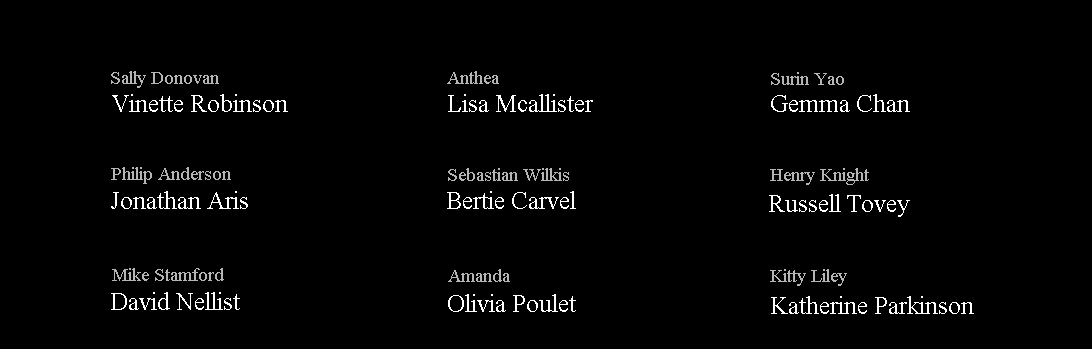
<style>
.page{position:relative;width:1092px;height:349px;background:#000000}
.page>*{position:absolute;margin:0}
.t1{font:19px "TimesNewRomanPSMT";color:#b5b5b5}
.t2{font:19.1px "TimesNewRomanPSMT";color:#b5b5b5}
.t3{font:25px "TimesNewRomanPSMT";color:#ffffff}
.t4{font:24.9px "TimesNewRomanPSMT";color:#ffffff}
.t5{font:18.8px "TimesNewRomanPSMT";color:#b5b5b5}
.t6{font:24.7px "TimesNewRomanPSMT";color:#ffffff}
.t7{font:25.1px "TimesNewRomanPSMT";color:#ffffff}
</style>
<div class="page">
<p class="t1" style="left:111px;top:71px;width:108px;height:17px">Sally Donovan</p>
<p class="t1" style="left:447px;top:71px;width:52px;height:13px">Anthea</p>
<p class="t2" style="left:771px;top:72px;width:73px;height:13px">Surin Yao</p>
<p class="t3" style="left:112px;top:94px;width:176px;height:18px">Vinette Robinson</p>
<p class="t4" style="left:448px;top:94px;width:145px;height:18px">Lisa Mcallister</p>
<p class="t3" style="left:771px;top:94px;width:139px;height:18px">Gemma Chan</p>
<p class="t5" style="left:111px;top:167px;width:120px;height:17px">Philip Anderson</p>
<p class="t2" style="left:448px;top:168px;width:121px;height:13px">Sebastian Wilkis</p>
<p class="t2" style="left:770px;top:168px;width:99px;height:17px">Henry Knight</p>
<p class="t6" style="left:111px;top:191px;width:137px;height:18px">Jonathan Aris</p>
<p class="t3" style="left:447px;top:191px;width:129px;height:18px">Bertie Carvel</p>
<p class="t3" style="left:769px;top:194px;width:141px;height:23px">Russell Tovey</p>
<p class="t2" style="left:112px;top:268px;width:112px;height:13px">Mike Stamford</p>
<p class="t2" style="left:448px;top:269px;width:62px;height:13px">Amanda</p>
<p class="t2" style="left:770px;top:269px;width:77px;height:17px">Kitty Liley</p>
<p class="t7" style="left:111px;top:292px;width:129px;height:18px">David Nellist</p>
<p class="t3" style="left:448px;top:294px;width:128px;height:18px">Olivia Poulet</p>
<p class="t3" style="left:771px;top:296px;width:203px;height:18px">Katherine Parkinson</p>
</div>
